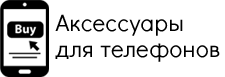
<style>
.page{position:relative;width:225px;height:77px;background:#ffffff}
.page>*{position:absolute;margin:0}
.t1{font:24px/26px "DidactGothic";letter-spacing:0.02em;color:#000000}
</style>
<div class="page">
<p class="t1" style="left:55px;top:14px;width:165px;height:48px">Аксессуары<br>для телефонов</p>
</div>
